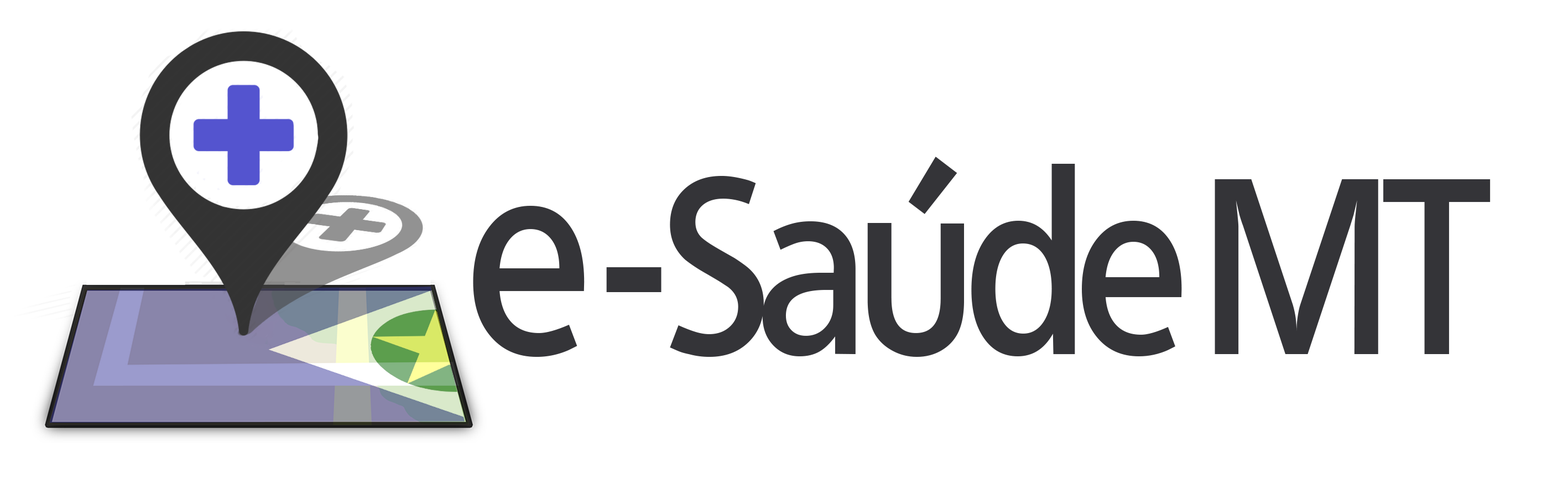
<style>
.page{position:relative;width:1568px;height:483px;background:#ffffff}
.page>*{position:absolute;margin:0}
.t1{font:270px "Quebec-Serial-Bold";letter-spacing:-0.06em;color:#343438;scale:0.85 1}
.t2{font:242.6px "Quebec-Serial-Bold";letter-spacing:-0.06em;color:#343438;scale:0.85 1}
</style>
<div class="page">
<p class="t1" style="left:908px;top:157px;width:49px;height:57px">´</p>
<p class="t2" style="left:473px;top:164px;width:1018px;height:193px"><span class="t1">e</span>-SaudeMT</p>
</div>
